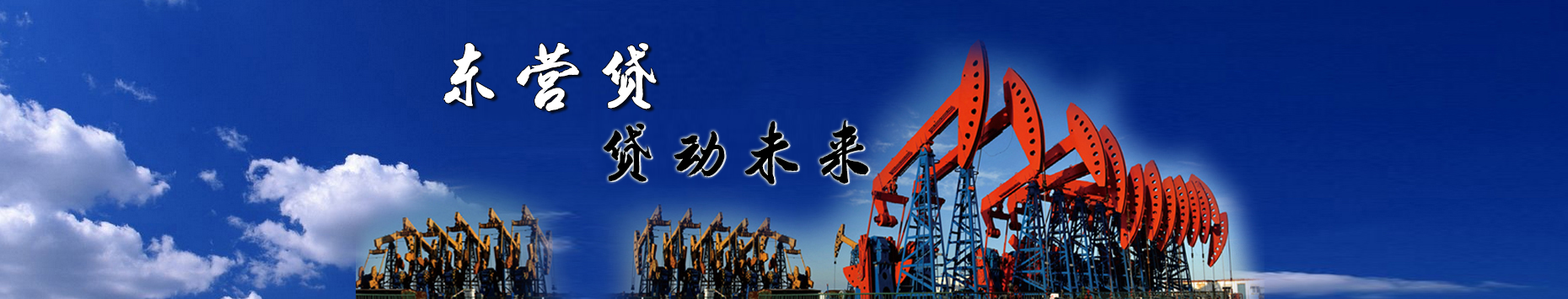
<style>
.page{position:relative;width:1568px;height:299px}
.page>*{position:absolute;margin:0}
.t1{font:80.7px "FZFGJW--GB1-0";color:#ffffff}
.t2{font:71.8px "FZFGJW--GB1-0";color:#000000}
</style>
<div class="page">
<p class="t1" style="left:443px;top:43px;width:214px;height:68px">东营贷</p>
<p class="t2" style="left:603px;top:120px;width:266px;height:65px">贷动未来</p>
</div>
